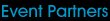
<style>
.page{position:relative;width:110px;height:21px;background:#000000}
.page>*{position:absolute;margin:0}
.t1{font:17px "AvantGardeITCbyBT-Medium";color:#0099cc}
</style>
<div class="page">
<p class="t1" style="left:2px;top:5px;width:106px;height:12px">Event Partners</p>
</div>
